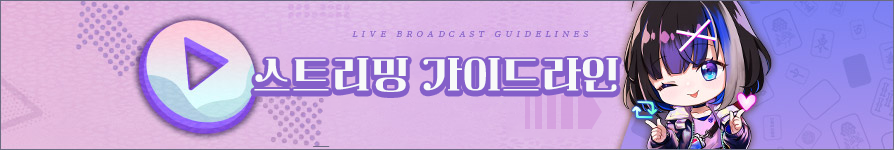
<style>
.page{position:relative;width:894px;height:150px}
.page>*{position:absolute;margin:0}
.t1{font:41px "Cafe24ClassicType-Regular";letter-spacing:0.04em;color:#f8faf9;scale:0.93 1}
</style>
<div class="page">
<p class="t1" style="left:254px;top:58px;width:364px;height:34px">스트리밍 가이드라인</p>
</div>
